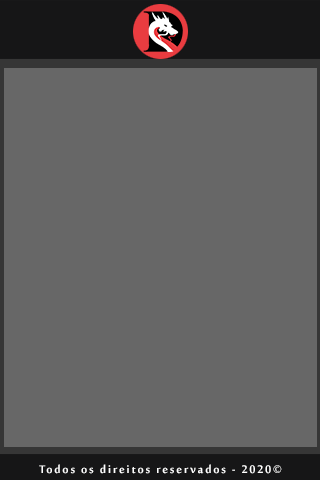
<style>
.page{position:relative;width:320px;height:480px;background:#676767}
.page>*{position:absolute;margin:0}
.t1{font:15px "SakkalMajallaBold";letter-spacing:0.12em;color:#ffffff}
</style>
<div class="page">
<p class="t1" style="left:39px;top:464px;width:243px;height:10px">Todos os direitos reservados - 2020©</p>
</div>
